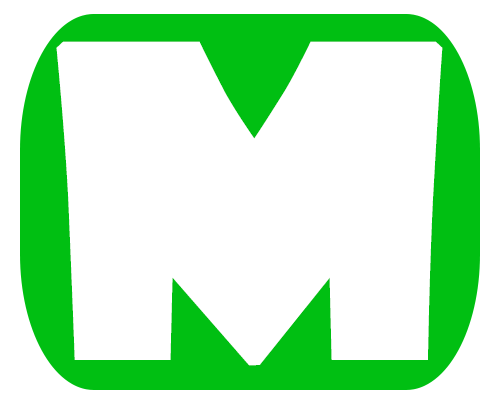
<style>
.page{position:relative;width:500px;height:400px;background:#ffffff}
.page>*{position:absolute;margin:0}
.t1{font:409.2px "ShowcardGothic-Reg";color:#ffffff;font-weight:bold;scale:1.15 1}
</style>
<div class="page">
<p class="t1" style="left:56px;top:41px;width:387px;height:325px">M</p>
</div>
